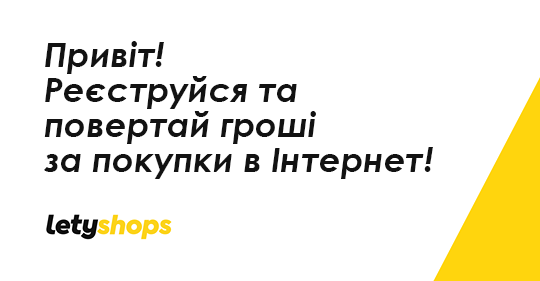
<style>
.page{position:relative;width:540px;height:281px;background:#ffffff}
.page>*{position:absolute;margin:0}
.t1{font:34px/35px "CenturyGothic-BoldItalic";color:#121212}
</style>
<div class="page">
<p class="t1" style="left:44px;top:41px;width:389px;height:138px">Привіт!<br>Реєструйся та <br>повертай гроші <br>за покупки в Інтернет!</p>
</div>
